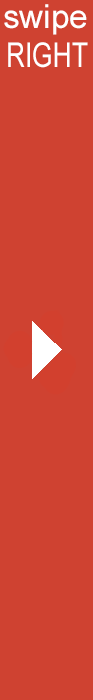
<style>
.page{position:relative;width:93px;height:700px;background:#cf4231}
.page>*{position:absolute;margin:0}
.t1{font:33.3px "ArialMT";color:#ffffff}
.t2{font:34.1px "ArialMT";color:#ffffff;scale:0.77 1}
</style>
<div class="page">
<p class="t1" style="left:4px;top:4px;width:83px;height:31px">swipe</p>
<p class="t2" style="left:8px;top:42px;width:80px;height:26px">RIGHT</p>
</div>
